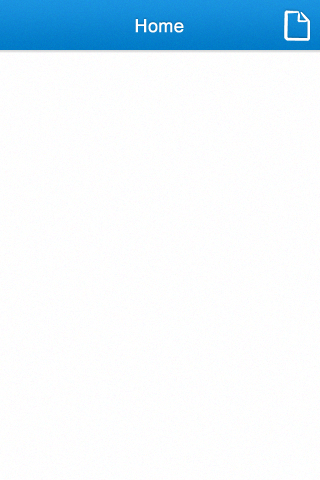
<style>
.page{position:relative;width:320px;height:480px}
.page>*{position:absolute;margin:0}
.t1{font:18px "ArialMT";letter-spacing:0.025em;color:#ffffff;font-weight:bold}
</style>
<div class="page">
<p class="t1" style="left:135px;top:19px;width:49px;height:14px">Home</p>
</div>
